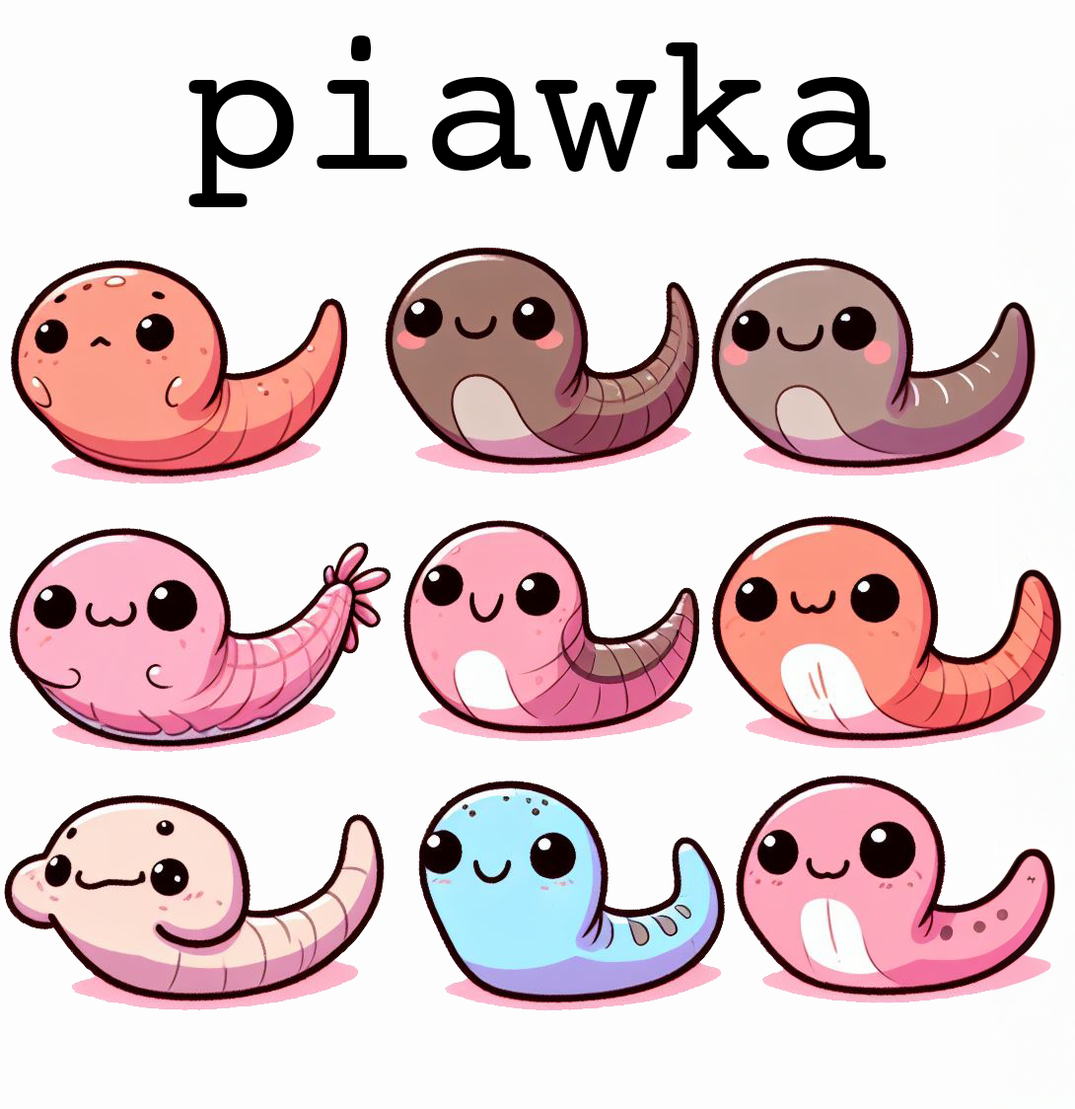
<style>
.page{position:relative;width:1075px;height:1109px;background:#fdfdfd}
.page>*{position:absolute;margin:0}
.t1{font:197.3px "Courier";color:#000000}
</style>
<div class="page">
<p class="t1" style="left:188px;top:36px;width:699px;height:171px">piawka</p>
</div>
